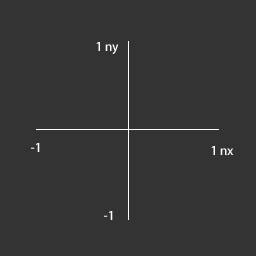
<style>
.page{position:relative;width:256px;height:256px;background:#333333}
.page>*{position:absolute;margin:0}
.t1{font:12px "AdobeHeitiStd-Regular";color:#ffffff}
</style>
<div class="page">
<p class="t1" style="left:96px;top:42px;width:23px;height:12px">1 ny</p>
<p class="t1" style="left:31px;top:143px;width:9px;height:9px">-1</p>
<p class="t1" style="left:211px;top:146px;width:23px;height:9px">1 nx</p>
<p class="t1" style="left:104px;top:211px;width:9px;height:9px">-1</p>
</div>
